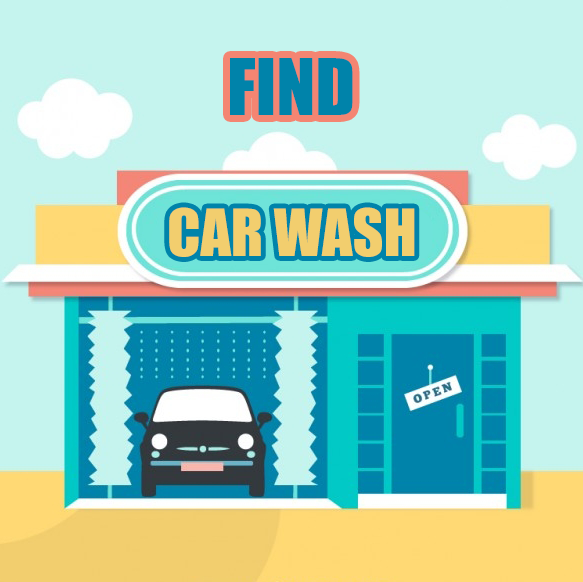
<style>
.page{position:relative;width:583px;height:582px;background:#c5f4ee}
.page>*{position:absolute;margin:0}
.t1{font:72px "Impact";color:#0083aa}
.t2{font:60px "Impact";color:#f2ce6e}
</style>
<div class="page">
<p class="t1" style="left:230px;top:58px;width:123px;height:57px">FIND</p>
<p class="t2" style="left:169px;top:207px;width:246px;height:50px">CAR WASH</p>
</div>
